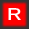
<style>
.page{position:relative;width:29px;height:29px;background:#ff0000}
.page>*{position:absolute;margin:0}
.t1{font:16.8px "Bahnschrift";letter-spacing:-0.1em;color:#ffffff;scale:1.43 1}
</style>
<div class="page">
<p class="t1" style="left:8px;top:8px;width:13px;height:12px">R</p>
</div>
